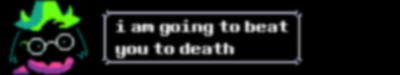
<style>
.page{position:relative;width:400px;height:75px;background:#000000}
.page>*{position:absolute;margin:0}
.t1{font:18.9px "DeterminationSansWeb";scale:1.32 1}
</style>
<div class="page">
<p class="t1" style="left:116px;top:20px;width:172px;height:38px">i am going to beat <br>you to death</p>
</div>
